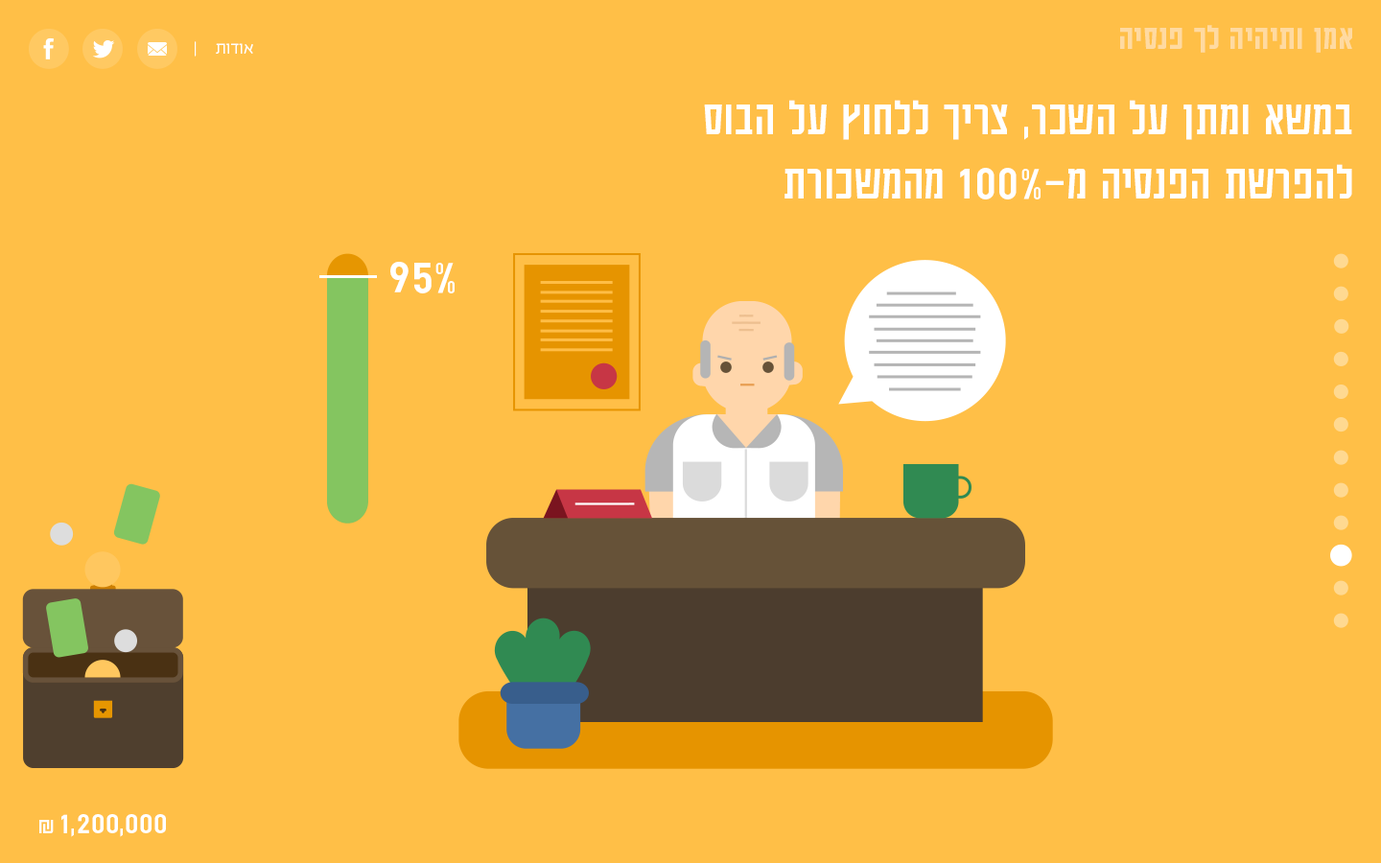
<style>
.page{position:relative;width:1381px;height:863px;background:#ffbf47}
.page>*{position:absolute;margin:0}
.t1{font:37.8px "AdumaFOT-Medium";color:#ffdaa1}
.t2{font:19.2px "EzerBlock_OE-Light";color:#ffffff}
.t3{font:53.8px "AdumaFOT-Regular";color:#ffffff}
.t4{font:33.6px "AdumaFOT-Regular";color:#ffffff}
.t5{font:24px "AdumaFOT-Regular";color:#ffffff}
</style>
<div class="page">
<p class="t1" style="left:1120px;top:25px;width:232px;height:28px">אמן ותיהיה לך פנסיה</p>
<p class="t2" style="left:195px;top:41px;width:58px;height:16px">אודות     |</p>
<p class="t3" style="left:704px;top:100px;width:648px;height:100px">במשא ומתן על השכר, צריך ללחוץ על הבוס <br>להפרשת הפנסיה מ-100% מהמשכורת</p>
<p class="t3" style="left:390px;top:262px;width:65px;height:32px">95%</p>
<p class="t4" style="left:39px;top:814px;width:127px;height:23px">1,200,000<span class="t5"> ₪</span></p>
</div>
